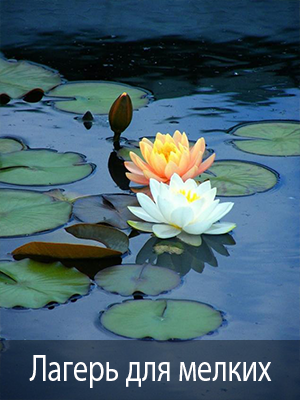
<style>
.page{position:relative;width:300px;height:400px}
.page>*{position:absolute;margin:0}
.t1{font:37.3px "MyriadPro-Regular";color:#ffffff;scale:0.8 1}
</style>
<div class="page">
<p class="t1" style="left:29px;top:355px;width:243px;height:33px">Лагерь для мелких</p>
</div>
